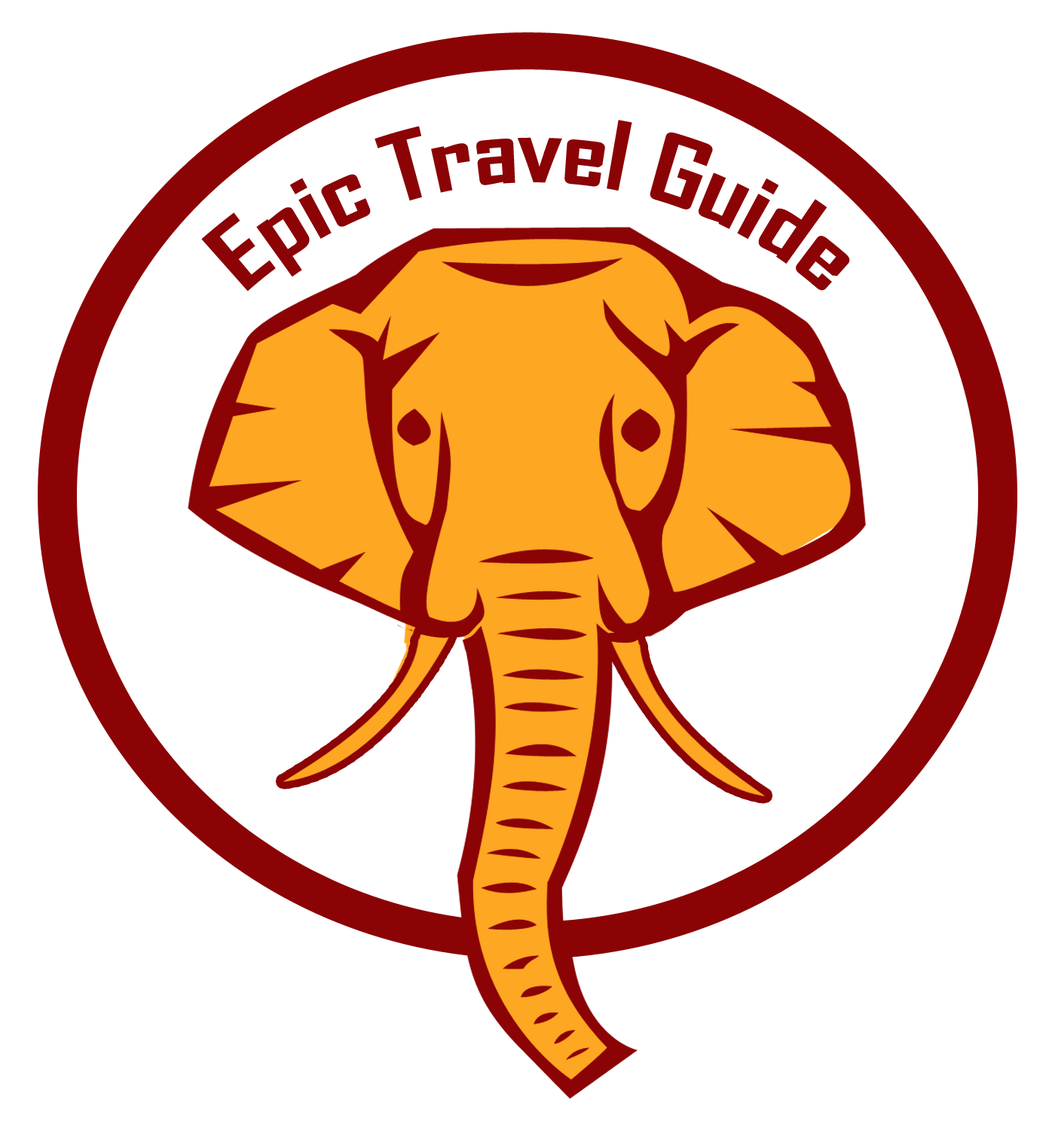
<style>
.page{position:relative;width:1055px;height:1130px;background:#ffffff}
.page>*{position:absolute;margin:0}
.t1{font:90.4px "AgencyFB-Bold";color:#8b0305}
</style>
<div class="page">
<p class="t1" style="left:201px;top:120px;width:649px;height:172px">Epic Travel Guide</p>
</div>
